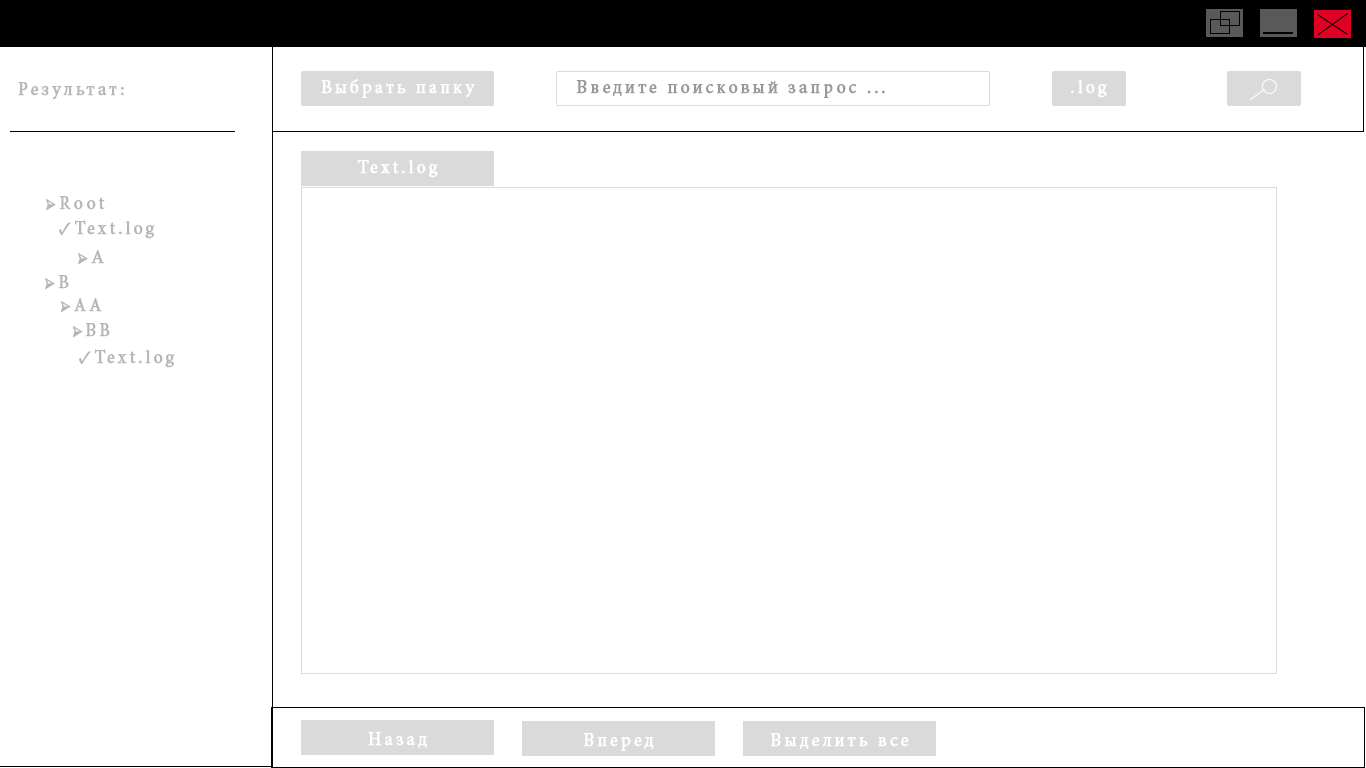
<style>
.page{position:relative;width:1366px;height:768px;background:#ffffff}
.page>*{position:absolute;margin:0}
.t1{font:18.5px "MinionPro-Regular";letter-spacing:0.15em;color:#b7b7b7;font-weight:bold}
.t2{font:18.5px "MinionPro-Regular";letter-spacing:0.15em;color:#ffffff;font-weight:bold}
.t3{font:18.5px "MinionPro-Regular";letter-spacing:0.15em;color:#999999;font-weight:bold}
</style>
<div class="page">
<p class="t1" style="left:18px;top:82px;width:106px;height:18px">Результат:</p>
<p class="t2" style="left:321px;top:79px;width:154px;height:19px">Выбрать папку</p>
<p class="t3" style="left:576px;top:80px;width:309px;height:18px">Введите поисковый запрос ...</p>
<p class="t2" style="left:1071px;top:80px;width:36px;height:18px">.log</p>
<p class="t2" style="left:357px;top:159px;width:81px;height:19px">Text.log</p>
<p class="t1" style="left:46px;top:196px;width:59px;height:15px">→Root</p>
<p class="t1" style="left:59px;top:220px;width:96px;height:19px">•Text.log</p>
<p class="t1" style="left:78px;top:250px;width:26px;height:15px">→A</p>
<p class="t1" style="left:45px;top:275px;width:24px;height:15px">→B</p>
<p class="t1" style="left:60px;top:298px;width:42px;height:15px">→AA</p>
<p class="t1" style="left:72px;top:323px;width:38px;height:15px">→BB</p>
<p class="t1" style="left:79px;top:349px;width:96px;height:19px">•Text.log</p>
<p class="t2" style="left:368px;top:732px;width:59px;height:16px">Назад</p>
<p class="t2" style="left:583px;top:733px;width:71px;height:18px">Вперед</p>
<p class="t2" style="left:770px;top:733px;width:139px;height:16px">Выделить все</p>
</div>
